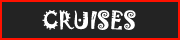
<style>
.page{position:relative;width:180px;height:40px;background:#232323}
.page>*{position:absolute;margin:0}
.t1{font:22px "Jokerman-Regular";color:#ffffff}
</style>
<div class="page">
<p class="t1" style="left:42px;top:10px;width:94px;height:20px">CRUISES</p>
</div>
